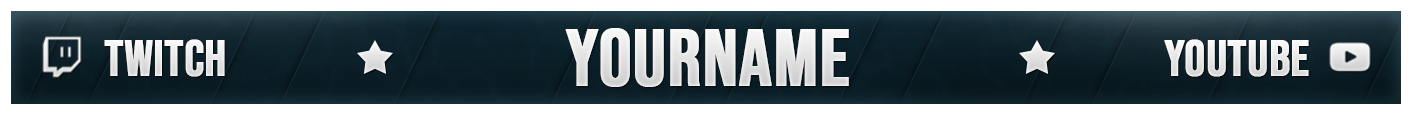
<style>
.page{position:relative;width:1411px;height:115px}
.page>*{position:absolute;margin:0}
.t1{font:80px "BebasNeue-Regular";color:#e8e8e8;text-transform:uppercase;font-weight:bold}
.t2{font:50.5px "BebasNeue-Regular";color:#ffffff;text-transform:uppercase;font-weight:bold}
</style>
<div class="page">
<p class="t1" style="left:565px;top:28px;width:284px;height:59px">YOURNAME</p>
<p class="t2" style="left:104px;top:39px;width:121px;height:38px">TWITCH</p>
<p class="t2" style="left:1164px;top:39px;width:145px;height:38px">YOUTUBE</p>
</div>
